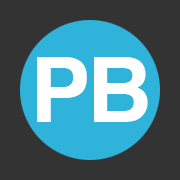
<style>
.page{position:relative;width:180px;height:180px;background:#333333}
.page>*{position:absolute;margin:0}
.t1{font:90px "Helvetica-Bold";color:#ffffff}
</style>
<div class="page">
<p class="t1" style="left:37px;top:57px;width:111px;height:65px">PB</p>
</div>
